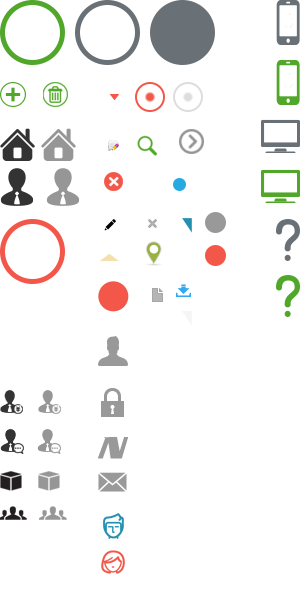
<style>
.page{position:relative;width:300px;height:600px;background:#ffffff}
.page>*{position:absolute;margin:0}
.t1{font:24.6px "Magnumpi";color:#999999}
</style>
<div class="page">
<p class="t1" style="left:98px;top:437px;width:31px;height:22px">N</p>
</div>
